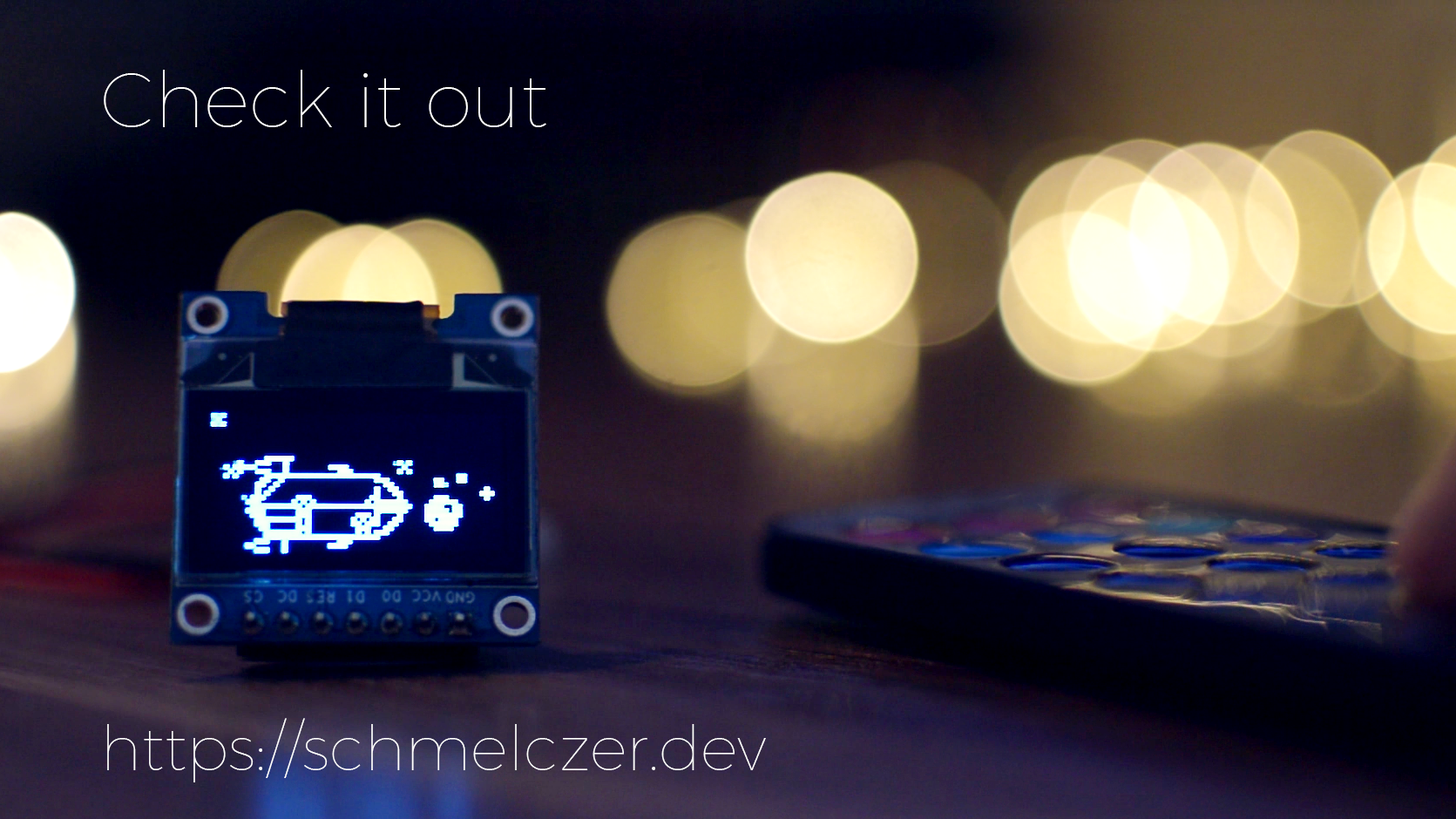
<style>
.page{position:relative;width:1456px;height:819px}
.page>*{position:absolute;margin:0}
.t1{font:76.7px "Montserrat-Thin";color:#ffffff}
.t2{font:62.7px "Montserrat-Thin";color:#ffffff}
</style>
<div class="page">
<p class="t1" style="left:104px;top:70px;width:442px;height:57px">Check it out</p>
<p class="t2" style="left:107px;top:718px;width:659px;height:64px">https://schmelczer.dev</p>
</div>
